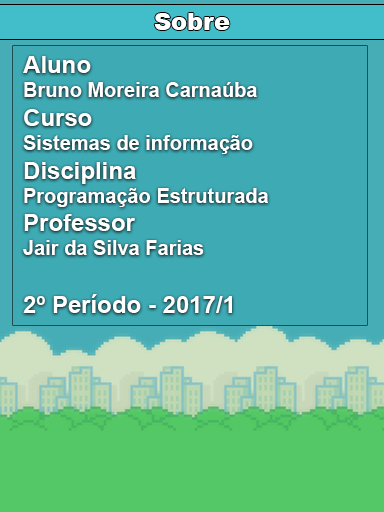
<style>
.page{position:relative;width:384px;height:512px;background:#3daab4}
.page>*{position:absolute;margin:0}
.t1{font:24px "Arial-Black";color:#ffffff}
.t2{font:20px "Arial-BoldMT";color:#ffffff}
.t3{font:24px "Arial-BoldMT";color:#ffffff}
</style>
<div class="page">
<p class="t1" style="left:154px;top:13px;width:76px;height:17px">Sobre</p>
<p class="t2" style="left:23px;top:56px;width:245px;height:257px"><span class="t3">Aluno<br></span>Bruno Moreira Carnaúba<br><span class="t3">Curso<br></span>Sistemas de informação<br><span class="t3">Disciplina<br></span>Programação Estruturada<br><span class="t3">Professor<br></span>Jair da Silva Farias<br><span class="t3"><br>2º Período - 2017/1</span></p>
</div>
